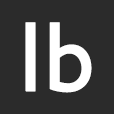
<style>
.page{position:relative;width:114px;height:114px;background:#2b2b2b}
.page>*{position:absolute;margin:0}
.t1{font:100px "GillSans";color:#ffffff;font-weight:bold}
</style>
<div class="page">
<p class="t1" style="left:25px;top:22px;width:67px;height:71px">lb</p>
</div>
